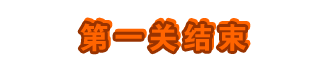
<style>
.page{position:relative;width:327px;height:74px;background:#ffffff}
.page>*{position:absolute;margin:0}
.t1{font:30px "Jdahei";letter-spacing:0.15em;color:#ff6400}
.t2{font:30px "Jdahei";letter-spacing:0.15em}
</style>
<div class="page">
<p class="t1" style="left:80px;top:23px;width:166px;height:29px">第一关结束</p>
<p class="t2" style="left:82px;top:20px;width:166px;height:29px">第一关结束</p>
</div>
